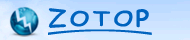
<style>
.page{position:relative;width:190px;height:40px}
.page>*{position:absolute;margin:0}
.t1{font:26px "ComicSansMS";letter-spacing:0.1em;color:#0063be;text-transform:uppercase;text-decoration:underline}
</style>
<div class="page">
<p class="t1" style="left:48px;top:8px;width:104px;height:27px">ZOTOP</p>
</div>
